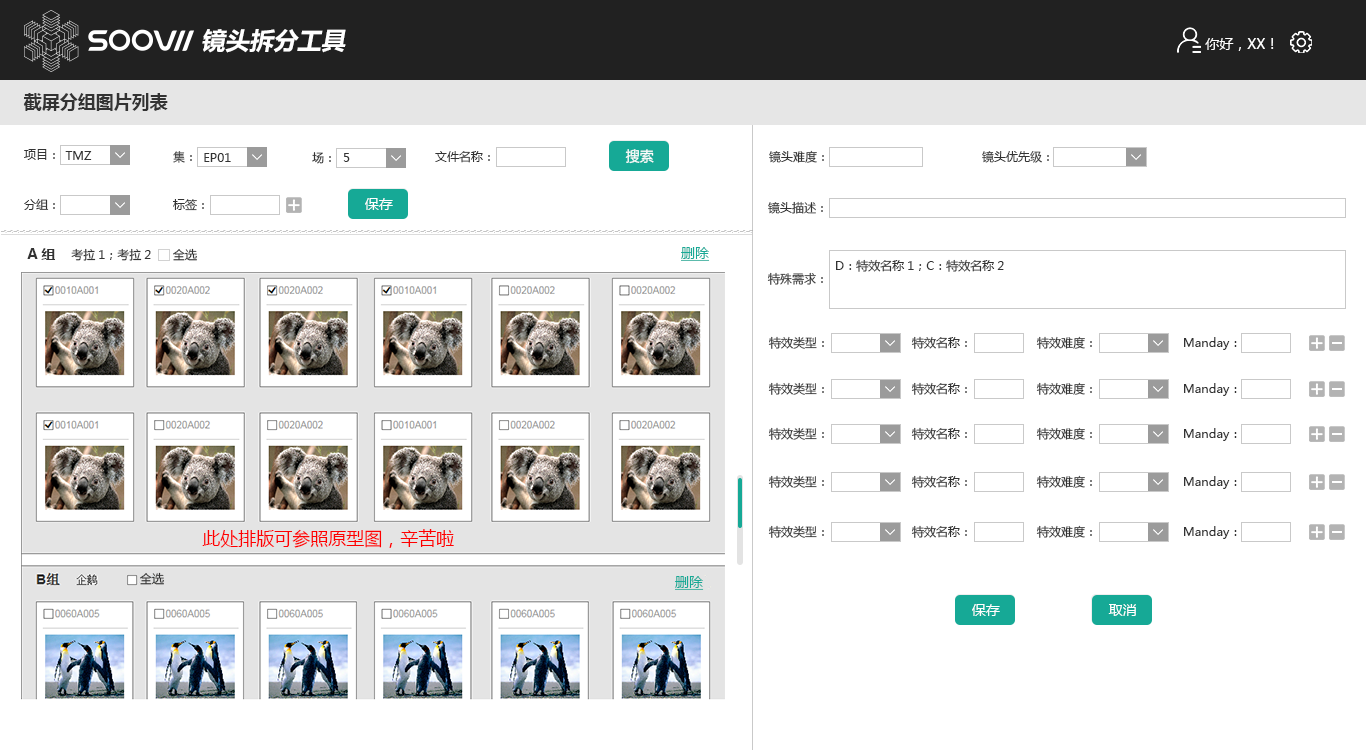
<style>
.page{position:relative;width:1366px;height:750px;background:#ffffff}
.page>*{position:absolute;margin:0}
.t1{font:24px "MicrosoftYaHei-Bold";color:#ffffff;font-style:italic}
.t2{font:14px "MicrosoftYaHei";color:#ffffff}
.t3{font:18px "MicrosoftYaHei-Bold";color:#333333}
.t4{font:12px "MicrosoftYaHei";color:#333333}
.t5{font:12px "MicrosoftYaHei"}
.t6{font:14px "MicrosoftYaHei-Bold";color:#333333}
.t7{font:14px "MicrosoftYaHei";color:#16a996;text-decoration:underline}
.t8{font:18px "MicrosoftYaHei";color:#fe0000}
</style>
<div class="page">
<p class="t1" style="left:202px;top:29px;width:144px;height:24px">镜头拆分工具</p>
<p class="t2" style="left:1205px;top:38px;width:69px;height:13px">你好，XX！</p>
<p class="t3" style="left:23px;top:93px;width:145px;height:18px">截屏分组图片列表</p>
<p class="t4" style="left:24px;top:149px;width:31px;height:11px">项目：</p>
<p class="t2" style="left:625px;top:149px;width:29px;height:15px">搜索</p>
<p class="t4" style="left:769px;top:150px;width:55px;height:13px">镜头难度：</p>
<p class="t4" style="left:65px;top:151px;width:27px;height:9px">TMZ</p>
<p class="t5" style="left:173px;top:151px;width:19px;height:12px">集：</p>
<p class="t4" style="left:204px;top:153px;width:27px;height:9px">EP01</p>
<p class="t4" style="left:312px;top:152px;width:19px;height:12px">场：</p>
<p class="t4" style="left:343px;top:153px;width:7px;height:9px">5</p>
<p class="t4" style="left:435px;top:151px;width:55px;height:12px">文件名称：</p>
<p class="t4" style="left:982px;top:151px;width:67px;height:12px">镜头优先级：</p>
<p class="t4" style="left:24px;top:198px;width:31px;height:12px">分组：</p>
<p class="t2" style="left:365px;top:198px;width:28px;height:12px">保存</p>
<p class="t4" style="left:173px;top:199px;width:31px;height:12px">标签：</p>
<p class="t4" style="left:768px;top:201px;width:55px;height:13px">镜头描述：</p>
<p class="t4" style="left:27px;top:248px;width:124px;height:13px"><span class="t6">A组   </span>考拉1；考拉2</p>
<p class="t4" style="left:173px;top:248px;width:24px;height:13px">全选</p>
<p class="t7" style="left:681px;top:247px;width:29px;height:14px">删除</p>
<p class="t4" style="left:836px;top:259px;width:168px;height:13px">D：特效名称1；C：特效名称2</p>
<p class="t4" style="left:767px;top:272px;width:56px;height:13px">特殊需求：</p>
<p class="t4" style="left:768px;top:336px;width:56px;height:13px">特效类型：</p>
<p class="t4" style="left:911px;top:336px;width:56px;height:13px">特效名称：</p>
<p class="t4" style="left:1036px;top:336px;width:56px;height:13px">特效难度：</p>
<p class="t4" style="left:1184px;top:337px;width:53px;height:13px">Manday：</p>
<p class="t4" style="left:768px;top:382px;width:56px;height:13px">特效类型：</p>
<p class="t4" style="left:911px;top:382px;width:56px;height:13px">特效名称：</p>
<p class="t4" style="left:1036px;top:382px;width:56px;height:13px">特效难度：</p>
<p class="t4" style="left:1184px;top:383px;width:53px;height:13px">Manday：</p>
<p class="t4" style="left:768px;top:427px;width:56px;height:13px">特效类型：</p>
<p class="t4" style="left:911px;top:427px;width:56px;height:13px">特效名称：</p>
<p class="t4" style="left:1036px;top:427px;width:56px;height:13px">特效难度：</p>
<p class="t4" style="left:1184px;top:428px;width:53px;height:13px">Manday：</p>
<p class="t4" style="left:768px;top:475px;width:56px;height:13px">特效类型：</p>
<p class="t4" style="left:911px;top:475px;width:56px;height:13px">特效名称：</p>
<p class="t4" style="left:1036px;top:475px;width:56px;height:13px">特效难度：</p>
<p class="t4" style="left:1184px;top:476px;width:53px;height:13px">Manday：</p>
<p class="t8" style="left:202px;top:529px;width:252px;height:19px">此处排版可参照原型图，辛苦啦</p>
<p class="t4" style="left:768px;top:525px;width:56px;height:13px">特效类型：</p>
<p class="t4" style="left:911px;top:525px;width:56px;height:13px">特效名称：</p>
<p class="t4" style="left:1036px;top:525px;width:56px;height:13px">特效难度：</p>
<p class="t4" style="left:1184px;top:526px;width:53px;height:13px">Manday：</p>
<p class="t4" style="left:140px;top:572px;width:24px;height:13px">全选</p>
<p class="t7" style="left:675px;top:576px;width:29px;height:14px">删除</p>
<p class="t2" style="left:972px;top:604px;width:28px;height:12px">保存</p>
<p class="t2" style="left:1108px;top:604px;width:28px;height:12px">取消</p>
</div>
